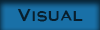
<style>
.page{position:relative;width:100px;height:30px;background:#1970a7}
.page>*{position:absolute;margin:0}
.t1{font:18px "Media-Gothic";color:#081e2c}
</style>
<div class="page">
<p class="t1" style="left:17px;top:8px;width:66px;height:14px">Visual</p>
</div>
